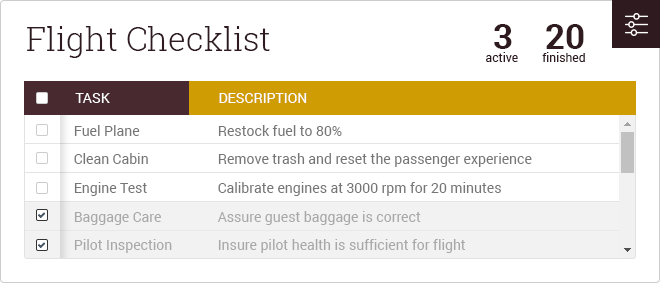
<style>
.page{position:relative;width:660px;height:283px;background:#ffffff}
.page>*{position:absolute;margin:0}
.t1{font:33px "RobotoSlab-Light";color:#2f1b1f}
.t2{font:35.1px "Roboto-Bold";color:#2f1b1f}
.t3{font:12px "Roboto-Regular";color:#2f1b1f}
.t4{font:14px "Roboto-Regular";color:#ffffff;text-transform:uppercase}
.t5{font:14px "Roboto-Regular";color:#767676}
.t6{font:14px "Roboto-Regular";color:#a8a8a8}
</style>
<div class="page">
<p class="t1" style="left:27px;top:26px;width:243px;height:32px">Flight Checklist</p>
<p class="t2" style="left:494px;top:24px;width:18px;height:25px">3</p>
<p class="t2" style="left:546px;top:24px;width:38px;height:25px">20</p>
<p class="t3" style="left:486px;top:52px;width:32px;height:10px">active</p>
<p class="t3" style="left:542px;top:52px;width:43px;height:10px">finished</p>
<p class="t4" style="left:75px;top:93px;width:35px;height:10px">Task</p>
<p class="t4" style="left:219px;top:93px;width:88px;height:10px">Description</p>
<p class="t5" style="left:74px;top:125px;width:66px;height:11px">Fuel Plane</p>
<p class="t5" style="left:218px;top:125px;width:124px;height:11px">Restock fuel to 80%</p>
<p class="t5" style="left:74px;top:153px;width:74px;height:11px">Clean Cabin</p>
<p class="t5" style="left:218px;top:153px;width:314px;height:14px">Remove trash and reset the passenger experience</p>
<p class="t5" style="left:74px;top:182px;width:73px;height:14px">Engine Test</p>
<p class="t5" style="left:218px;top:182px;width:283px;height:14px">Calibrate engines at 3000 rpm for 20 minutes</p>
<p class="t6" style="left:74px;top:212px;width:87px;height:13px">Baggage Care</p>
<p class="t6" style="left:217px;top:211px;width:204px;height:14px">Assure guest baggage is correct</p>
<p class="t6" style="left:74px;top:239px;width:98px;height:14px">Pilot Inspection</p>
<p class="t6" style="left:218px;top:239px;width:247px;height:14px">Insure pilot health is sufficient for flight</p>
</div>
